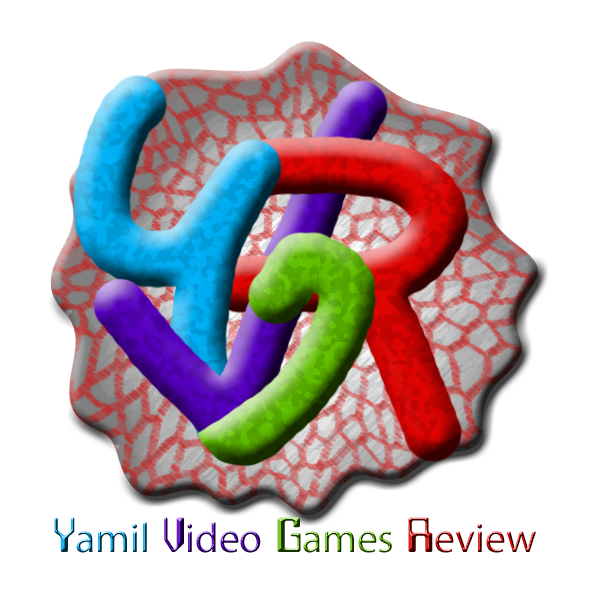
<style>
.page{position:relative;width:600px;height:600px;background:#ffffff}
.page>*{position:absolute;margin:0}
.t1{font:41.7px "MyriadPro-Regular"}
.t2{font:41.7px "Mycalc"}
</style>
<div class="page">
<p class="t1" style="left:54px;top:517px;width:482px;height:36px"><span class="t2">Y</span>amil <span class="t2">V</span>ideo <span class="t2">G</span>ames <span class="t2">R</span>eview</p>
</div>
